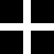
<style>
.page{position:relative;width:54px;height:54px;background:#000000}
.page>*{position:absolute;margin:0}
.t1{font:89.3px "Verdana";color:#ffffff}
</style>
<div class="page">
<p class="t1" style="left:0px;top:0px;width:55px;height:55px">+</p>
</div>
